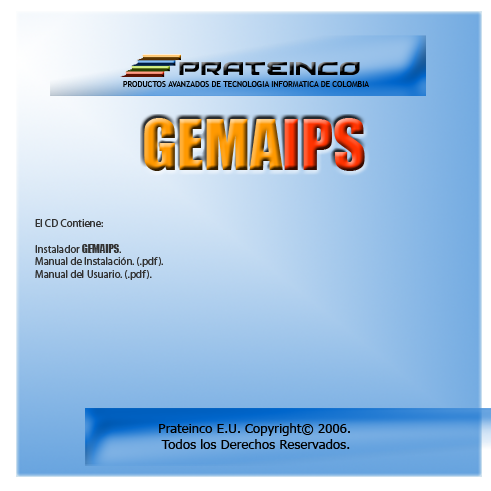
<style>
.page{position:relative;width:491px;height:491px}
.page>*{position:absolute;margin:0}
.t1{font:64px "Impact";color:#ff9900}
.t2{font:64px "Impact";color:#ff3300}
.t3{font:10.7px "MyriadPro-Regular";color:#333333}
.t4{font:10.7px "Impact";color:#333333}
.t5{font:13.3px "Tahoma";color:#000000}
</style>
<div class="page">
<p class="t1" style="left:144px;top:118px;width:221px;height:53px">GEMA<span class="t2">IPS</span></p>
<p class="t3" style="left:35px;top:219px;width:128px;height:61px">El CD Contiene:<br><br>Instalador <span class="t4">GEMAIPS</span>.<br>Manual de Instalación. (.pdf).<br>Manual del Usuario. (.pdf).</p>
<p class="t5" style="left:159px;top:423px;width:191px;height:26px;text-align:center">Prateinco E.U. Copyright© 2006. <br>Todos los Derechos Reservados.</p>
</div>
